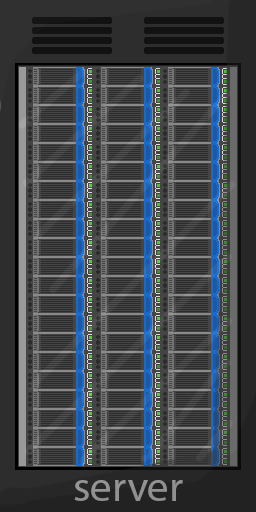
<style>
.page{position:relative;width:256px;height:512px;background:#454545}
.page>*{position:absolute;margin:0}
.t1{font:42.3px "MyriadPro-Regular";color:#909090}
</style>
<div class="page">
<p class="t1" style="left:74px;top:480px;width:109px;height:21px">server</p>
</div>
